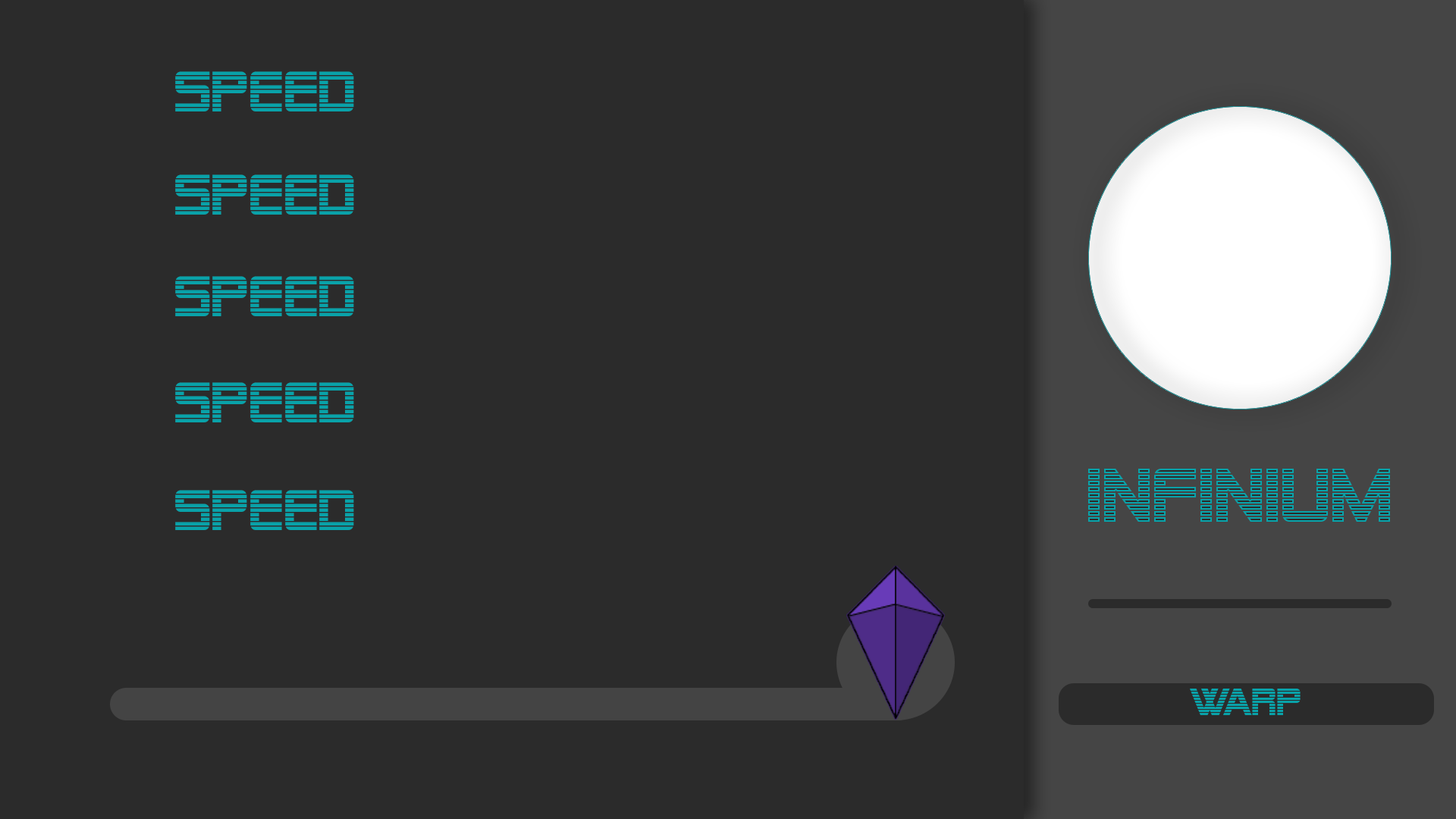
<style>
.page{position:relative;width:1456px;height:819px;background:#2b2b2b}
.page>*{position:absolute;margin:0}
.t1{font:56.9px "AlienEncounters";color:#09a2a9}
.t2{font:75.8px "AlienEncounters";color:#09a2a9}
.t3{font:37.9px "AlienEncounters";color:#09a2a9}
</style>
<div class="page">
<p class="t1" style="left:175px;top:71px;width:179px;height:40px">Speed</p>
<p class="t1" style="left:175px;top:174px;width:179px;height:41px">Speed</p>
<p class="t1" style="left:175px;top:276px;width:179px;height:40px">Speed</p>
<p class="t1" style="left:175px;top:382px;width:179px;height:40px">Speed</p>
<p class="t2" style="left:1088px;top:469px;width:302px;height:53px">Infinium</p>
<p class="t1" style="left:175px;top:490px;width:179px;height:40px">Speed</p>
<p class="t3" style="left:1190px;top:689px;width:111px;height:26px">Warp</p>
</div>
